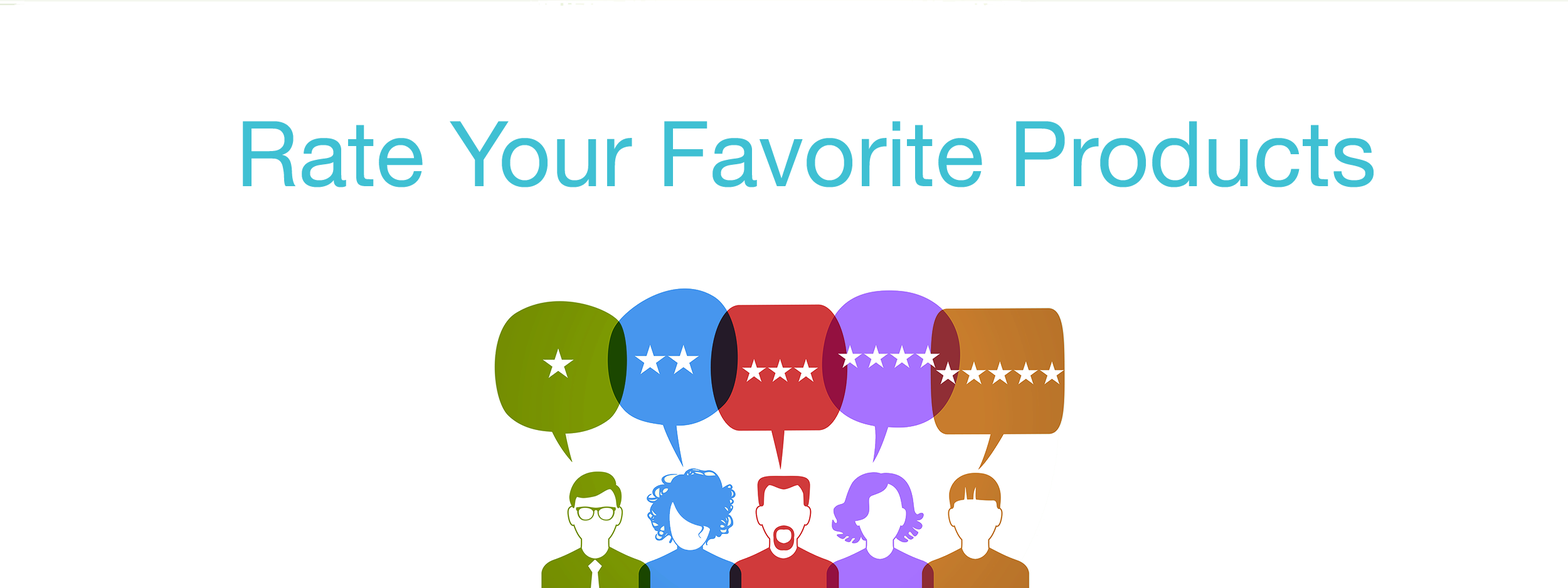
<style>
.page{position:relative;width:1568px;height:588px;background:#ffffff}
.page>*{position:absolute;margin:0}
.t1{font:90.9px "HelveticaNeue";color:#3fc0d2}
</style>
<div class="page">
<p class="t1" style="left:243px;top:121px;width:1131px;height:67px">Rate Your Favorite Products</p>
</div>
